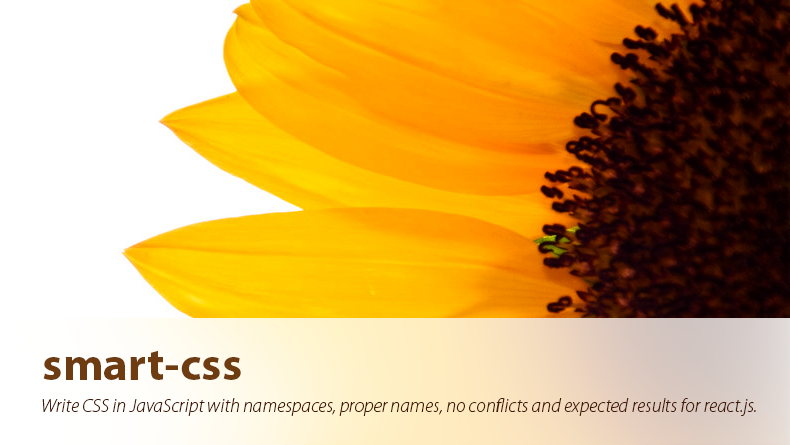
<style>
.page{position:relative;width:790px;height:445px}
.page>*{position:absolute;margin:0}
.t1{font:47.1px "MyriadPro-Bold";color:#6f3b11}
.t2{font:19px "MyriadPro-LightIt";color:#431a06}
</style>
<div class="page">
<p class="t1" style="left:43px;top:350px;width:198px;height:30px">smart-css</p>
<p class="t2" style="left:42px;top:398px;width:714px;height:18px">Write CSS in JavaScript with namespaces, proper names, no conflicts and expected results for react.js.</p>
</div>
